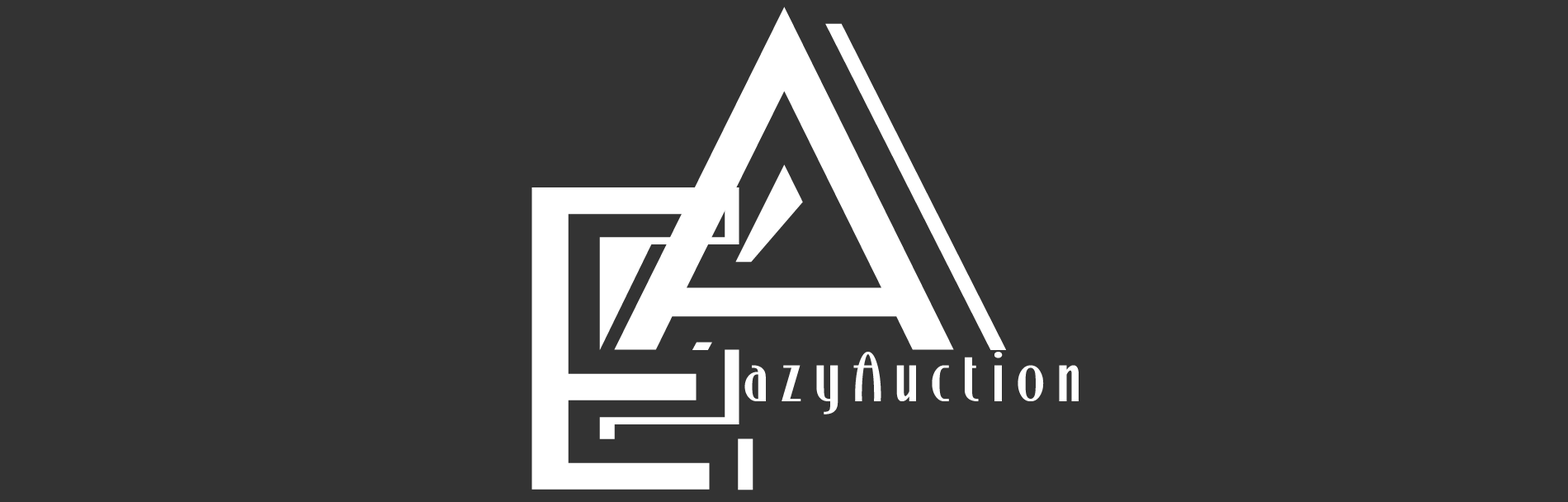
<style>
.page{position:relative;width:1568px;height:502px;background:#333333}
.page>*{position:absolute;margin:0}
.t1{font:378.2px "SeasideResortNF";letter-spacing:0.2em;color:#ffffff;text-transform:uppercase;scale:1.35 1}
.t2{font:349.9px "SeasideResortNF";letter-spacing:0.2em;color:#ffffff;text-transform:uppercase;scale:1.35 1}
.t3{font:65px "StonyIslandNF";letter-spacing:0.2em;color:#ffffff}
</style>
<div class="page">
<p class="t1" style="left:614px;top:7px;width:392px;height:343px">A</p>
<p class="t2" style="left:531px;top:187px;width:222px;height:303px">E</p>
<p class="t3" style="left:744px;top:352px;width:335px;height:62px">azyAuction</p>
</div>
